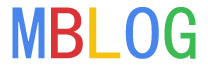
<style>
.page{position:relative;width:208px;height:68px;background:#ffffff}
.page>*{position:absolute;margin:0}
.t1{font:76px "KaiTi";color:#4885ed;text-transform:uppercase}
.t2{font:76px "KaiTi";color:#db3236;text-transform:uppercase}
.t3{font:76px "KaiTi";color:#f4c20d;text-transform:uppercase}
.t4{font:76px "KaiTi";color:#3cba54;text-transform:uppercase}
</style>
<div class="page">
<p class="t1" style="left:12px;top:7px;width:184px;height:52px">M<span class="t2">B</span><span class="t3">L</span>O<span class="t4">G</span></p>
</div>
